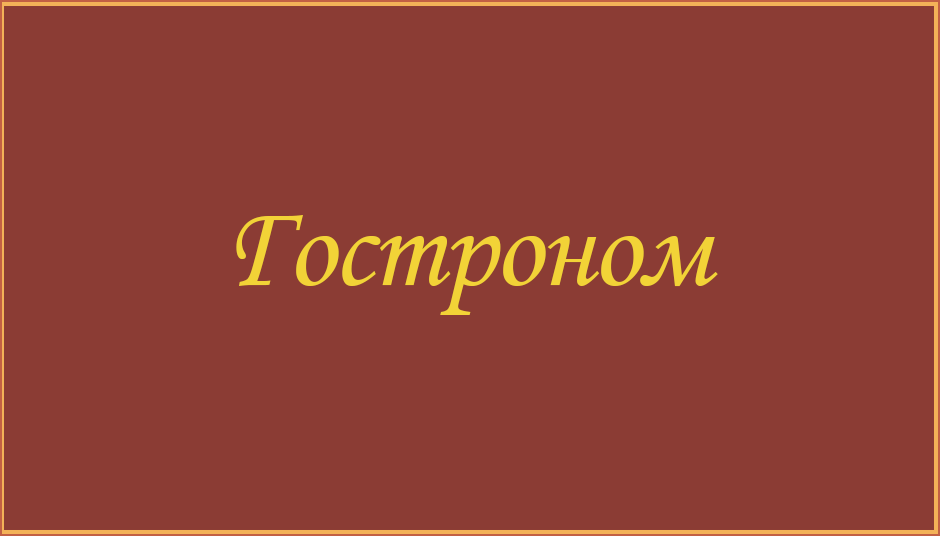
<style>
.page{position:relative;width:940px;height:536px;background:#8b3c34}
.page>*{position:absolute;margin:0}
.t1{font:120px "MonotypeCorsiva";letter-spacing:-0.02em;color:#f2d337}
</style>
<div class="page">
<p class="t1" style="left:236px;top:215px;width:482px;height:100px">Гостроном</p>
</div>
